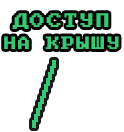
<style>
.page{position:relative;width:124px;height:132px;background:#ffffff}
.page>*{position:absolute;margin:0}
.t1{font:15.7px "PxPlus_IBM_BIOS";letter-spacing:0.075em;color:#39c773}
.t2{font:14.2px "PxPlus_IBM_BIOS";letter-spacing:0.075em;color:#39c773}
</style>
<div class="page">
<p class="t1" style="left:12px;top:13px;width:97px;height:16px">ДОСТУП</p>
<p class="t2" style="left:4px;top:36px;width:115px;height:13px">НА КРЫШУ</p>
</div>
